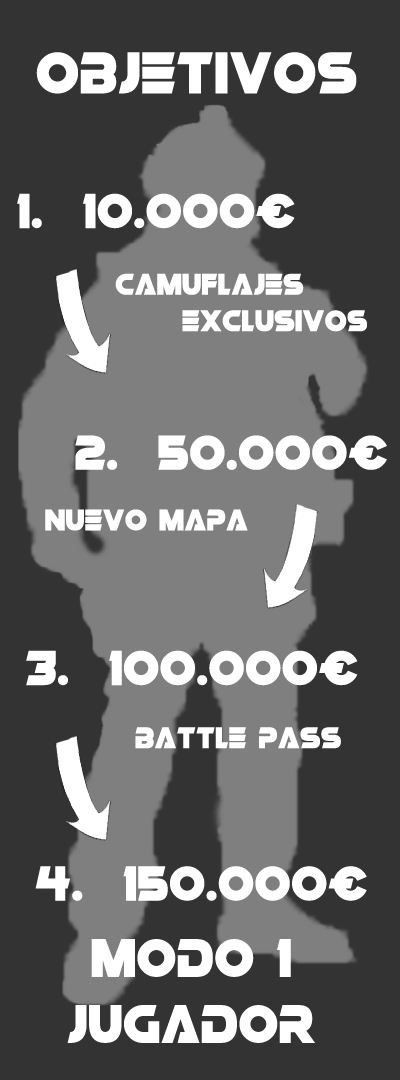
<style>
.page{position:relative;width:400px;height:1080px;background:#333333}
.page>*{position:absolute;margin:0}
.t1{font:60px "Affirmative";color:#ffffff}
.t2{font:50px "Affirmative";color:#ffffff}
.t3{font:30.4px "Affirmative";color:#ffffff}
.t4{font:55px "Affirmative";color:#ffffff}
</style>
<div class="page">
<p class="t1" style="left:36px;top:52px;width:321px;height:42px">OBJETIVOS</p>
<p class="t2" style="left:17px;top:193px;width:278px;height:36px">1.  10.000€</p>
<p class="t3" style="left:115px;top:273px;width:252px;height:59px;text-align:center">CAMUFLAJES<br>           EXCLUSIVOS</p>
<p class="t2" style="left:75px;top:435px;width:312px;height:35px">2.  50.000€</p>
<p class="t3" style="left:45px;top:509px;width:203px;height:22px">NUEVO MAPA</p>
<p class="t2" style="left:26px;top:650px;width:332px;height:36px">3.  100.000€</p>
<p class="t3" style="left:135px;top:727px;width:206px;height:22px">BATTLE PASS</p>
<p class="t2" style="left:35px;top:866px;width:332px;height:35px">4.  150.000€</p>
<p class="t4" style="left:67px;top:939px;width:248px;height:104px;text-align:center">MODO 1<br>JUGADOR</p>
</div>
